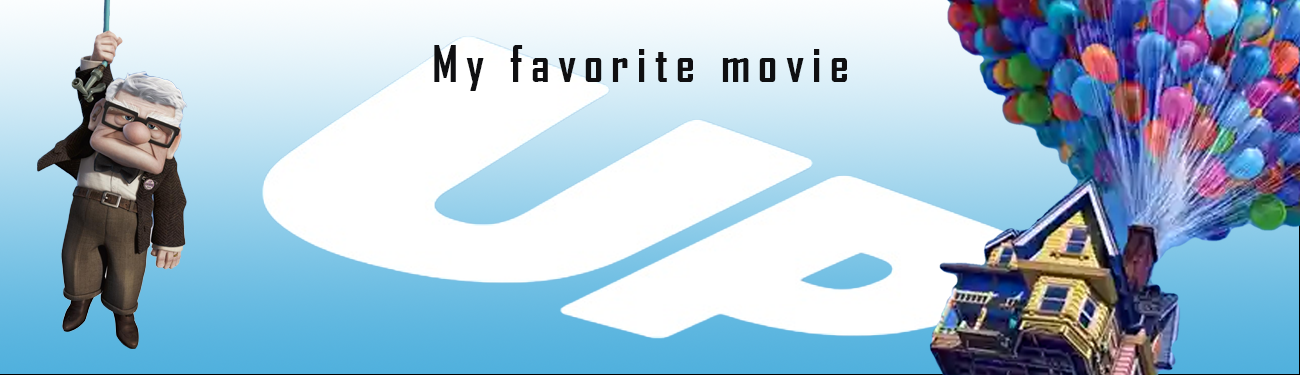
<style>
.page{position:relative;width:1300px;height:375px}
.page>*{position:absolute;margin:0}
.t1{font:48px "AgencyFB-Bold";letter-spacing:0.18em;color:#0f0f11;scale:0.97 1}
</style>
<div class="page">
<p class="t1" style="left:434px;top:45px;width:413px;height:46px">My favorite movie</p>
</div>
